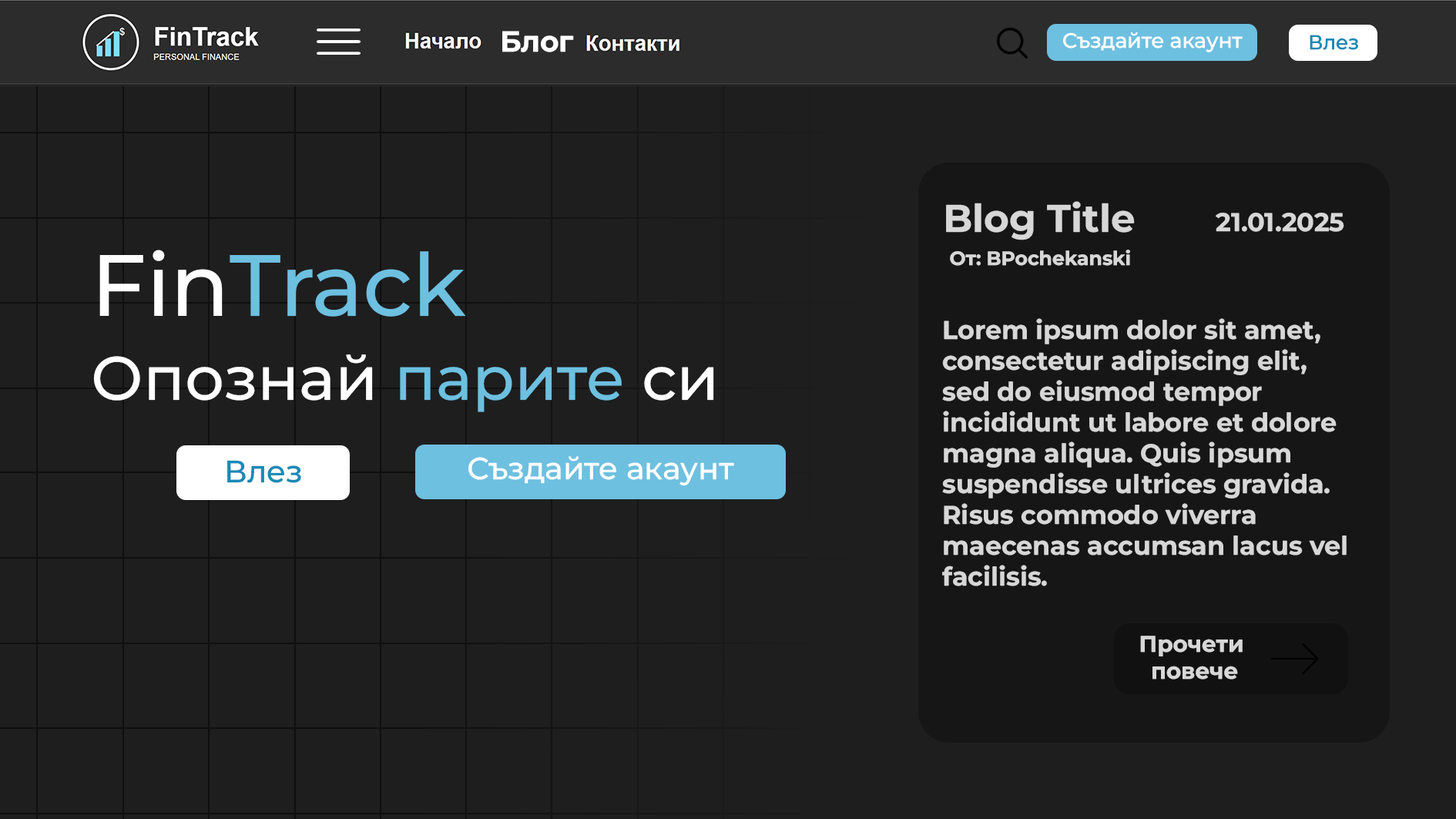
<style>
.page{position:relative;width:1456px;height:819px;background:#1e1e1e}
.page>*{position:absolute;margin:0}
.t1{font:28.9px "MontserratRoman-Bold";color:#ffffff}
.t2{font:20.7px "MontserratRoman-Medium";color:#ffffff}
.t3{font:20.1px "MontserratRoman-Medium";color:#188ab6}
.t4{font:38.5px "MontserratRoman-Bold";color:#d7d7d7}
.t5{font:25.7px "MontserratRoman-Bold";color:#d7d7d7}
.t6{font:86.9px "MontserratRoman-Medium";color:#6dc0e0}
.t7{font:86.9px "MontserratRoman-Medium";color:#ffffff}
.t8{font:19.3px "MontserratRoman-Bold";color:#d7d7d7}
.t9{font:61.4px "MontserratRoman-Medium";color:#ffffff}
.t10{font:61.4px "MontserratRoman-Medium";color:#6dc0e0}
.t11{font:30.7px "MontserratRoman-Medium";color:#188ab6}
.t12{font:30.7px "MontserratRoman-Medium";color:#ffffff}
.t13{font:22.5px "MontserratRoman-Bold";color:#d7d7d7}
</style>
<div class="page">
<p class="t1" style="left:502px;top:31px;width:72px;height:21px">Блог</p>
<p class="t2" style="left:1063px;top:32px;width:180px;height:20px">Създайте акаунт</p>
<p class="t3" style="left:1310px;top:35px;width:48px;height:15px">Влез</p>
<p class="t4" style="left:946px;top:201px;width:189px;height:39px">Blog Title</p>
<p class="t5" style="left:1216px;top:213px;width:128px;height:19px">21.01.2025</p>
<p class="t6" style="left:99px;top:250px;width:367px;height:67px"><span class="t7">Fin</span>Track</p>
<p class="t8" style="left:950px;top:250px;width:180px;height:16px">От: BPochekanski</p>
<p class="t5" style="left:942px;top:318px;width:405px;height:268px">Lorem ipsum dolor sit amet, consectetur adipiscing elit, sed do eiusmod tempor incididunt ut labore et dolore magna aliqua. Quis ipsum suspendisse ultrices gravida. Risus commodo viverra maecenas accumsan lacus vel facilisis.</p>
<p class="t9" style="left:93px;top:354px;width:621px;height:58px">Опознай <span class="t10">парите </span>си</p>
<p class="t11" style="left:227px;top:460px;width:74px;height:23px">Влез</p>
<p class="t12" style="left:468px;top:456px;width:266px;height:30px">Създайте акаунт</p>
<p class="t13" style="left:1140px;top:636px;width:103px;height:43px;text-align:center">Прочети <br>повече</p>
</div>
